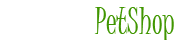
<style>
.page{position:relative;width:176px;height:40px;background:#ffffff}
.page>*{position:absolute;margin:0}
.t1{font:36px "JuiceITC-Regular";color:#3f9500}
</style>
<div class="page">
<p class="t1" style="left:94px;top:7px;width:80px;height:35px">PetShop</p>
</div>
